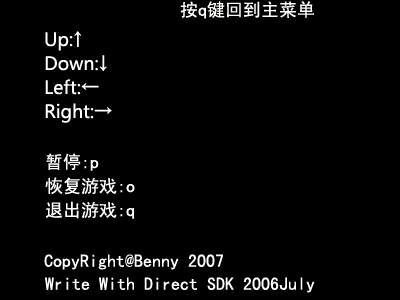
<style>
.page{position:relative;width:400px;height:300px;background:#000000}
.page>*{position:absolute;margin:0}
.t1{font:18px "SimHei";color:#fdfdfa}
.t2{font:18px/24px "MicrosoftYaHei";color:#ffffff}
.t3{font:18px/24px "SimHei";color:#ffffff}
.t4{font:18px "SimHei";color:#ffffff}
</style>
<div class="page">
<p class="t1" style="left:180px;top:1px;width:134px;height:18px">按q键回到主菜单</p>
<p class="t2" style="left:45px;top:31px;width:67px;height:92px">Up:↑<br>Down:↓<br>Left:←<br>Right:→</p>
<p class="t3" style="left:45px;top:153px;width:90px;height:66px">暂停:p<br>恢复游戏:o<br>退出游戏:q</p>
<p class="t4" style="left:44px;top:254px;width:179px;height:16px">CopyRight@Benny 2007</p>
<p class="t4" style="left:45px;top:277px;width:270px;height:16px">Write With Direct SDK 2006July</p>
</div>
